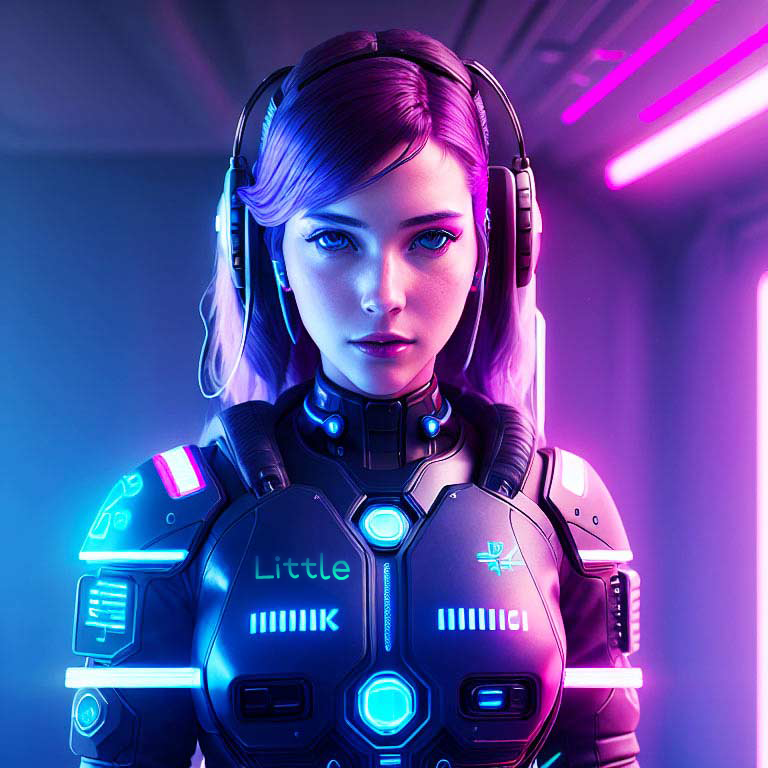
<style>
.page{position:relative;width:768px;height:768px}
.page>*{position:absolute;margin:0}
.t1{font:36px "XiaolaiSC";letter-spacing:0.02em}
</style>
<div class="page">
<p class="t1" style="left:255px;top:552px;width:95px;height:28px">Little</p>
</div>
